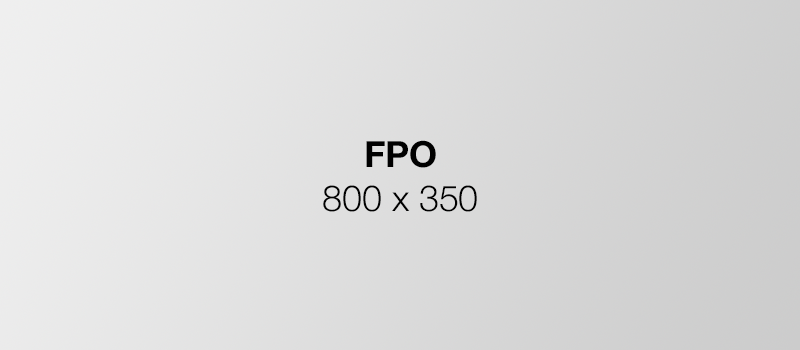
<style>
.page{position:relative;width:800px;height:350px}
.page>*{position:absolute;margin:0}
.t1{font:36px/24px "HelveticaNeue-Light";color:#000000}
.t2{font:36px/24px "HelveticaNeue-Bold";color:#000000}
</style>
<div class="page">
<p class="t1" style="left:323px;top:140px;width:154px;height:72px;text-align:center"><span class="t2">FPO<br></span>800 x 350</p>
</div>
